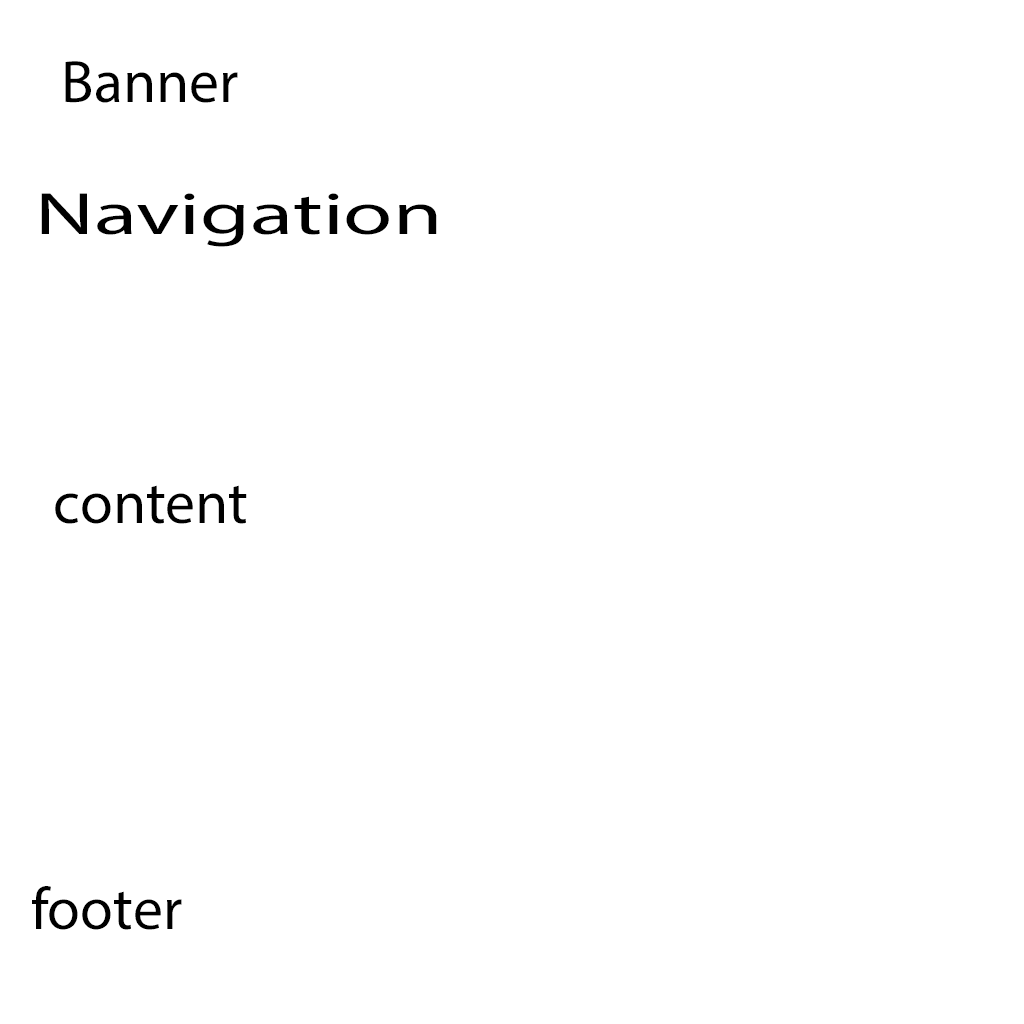
<style>
.page{position:relative;width:1024px;height:1024px;background:#ffffff}
.page>*{position:absolute;margin:0}
.t1{font:60px "MyriadPro-Regular";color:#000000}
.t2{font:60px "MyriadPro-Regular";color:#000000;scale:1.49 1}
</style>
<div class="page">
<p class="t1" style="left:65px;top:61px;width:173px;height:42px">Banner</p>
<p class="t2" style="left:41px;top:193px;width:396px;height:54px">Navigation Bar</p>
<p class="t1" style="left:55px;top:485px;width:192px;height:39px">content</p>
<p class="t1" style="left:32px;top:886px;width:150px;height:44px">footer</p>
</div>
